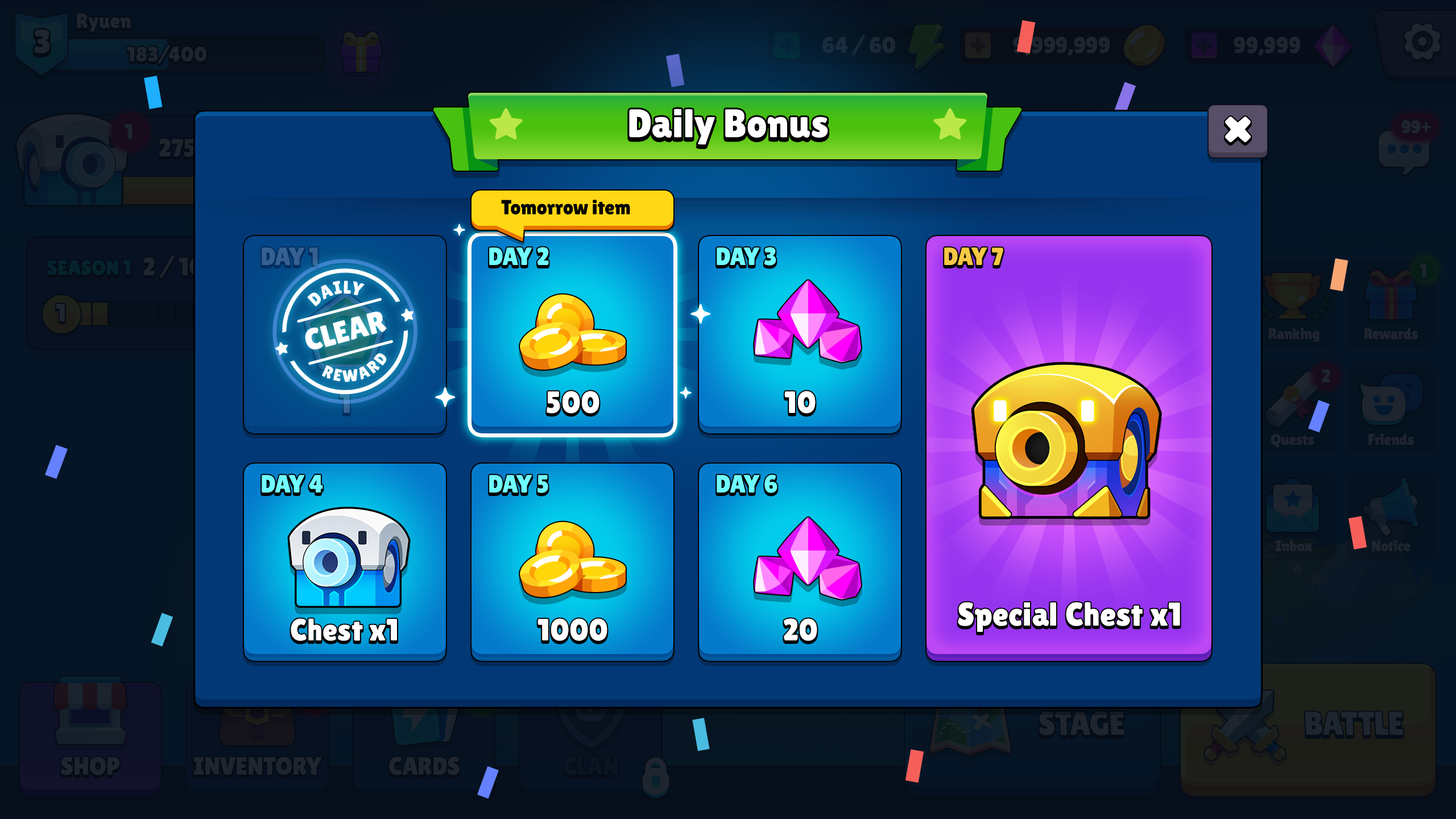
<style>
.page{position:relative;width:1456px;height:819px}
.page>*{position:absolute;margin:0}
.t1{font:39.8px "LilitaOne";color:#ffffff}
.t2{font:20.5px "LilitaOne";letter-spacing:-0.01em;color:#000000}
.t3{font:25px "LilitaOne";color:#356091;text-transform:uppercase}
.t4{font:25px "LilitaOne";color:#70fdff;text-transform:uppercase}
.t5{font:25px "LilitaOne";color:#f6c845;text-transform:uppercase}
.t6{font:18.2px "LilitaOne";letter-spacing:0.02em;color:#ffffff;text-transform:uppercase}
.t7{font:30.5px "LilitaOne";color:#ffffff;text-transform:uppercase}
.t8{font:16.7px "LilitaOne";letter-spacing:0.15em;color:#ffffff;text-transform:uppercase}
.t9{font:30.7px "LilitaOne";letter-spacing:0.02em;text-transform:uppercase}
.t10{font:30.7px "LilitaOne";letter-spacing:0.02em;color:#ffffff;text-transform:uppercase}
.t11{font:33px "LilitaOne";letter-spacing:0.02em;color:#ffffff}
.t12{font:30.7px "LilitaOne";letter-spacing:0.02em;color:#ffffff}
</style>
<div class="page">
<p class="t1" style="left:629px;top:109px;width:199px;height:35px">Daily Bonus</p>
<p class="t2" style="left:501px;top:200px;width:129px;height:14px">Tomorrow item</p>
<p class="t3" style="left:262px;top:247px;width:56px;height:18px">Day 1</p>
<p class="t4" style="left:489px;top:247px;width:60px;height:18px">Day 2</p>
<p class="t4" style="left:717px;top:247px;width:59px;height:19px">Day 3</p>
<p class="t5" style="left:944px;top:247px;width:59px;height:19px">Day 7</p>
<p class="t6" style="left:307px;top:280px;width:58px;height:27px;rotate:-14deg">daily</p>
<p class="t7" style="left:305px;top:312px;width:82px;height:38px;rotate:-15deg">clear</p>
<p class="t8" style="left:322px;top:353px;width:65px;height:29px;rotate:-14deg">reward</p>
<p class="t9" style="left:339px;top:391px;width:11px;height:22px">1</p>
<p class="t10" style="left:547px;top:391px;width:52px;height:22px">500</p>
<p class="t10" style="left:784px;top:391px;width:32px;height:22px">10</p>
<p class="t4" style="left:262px;top:475px;width:61px;height:18px">Day 4</p>
<p class="t4" style="left:489px;top:475px;width:59px;height:18px">Day 5</p>
<p class="t4" style="left:717px;top:474px;width:60px;height:19px">Day 6</p>
<p class="t11" style="left:958px;top:602px;width:222px;height:30px">Special Chest x1</p>
<p class="t12" style="left:291px;top:618px;width:106px;height:23px">Chest x1</p>
<p class="t10" style="left:537px;top:618px;width:70px;height:23px">1000</p>
<p class="t10" style="left:784px;top:618px;width:33px;height:23px">20</p>
</div>
